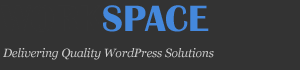
<style>
.page{position:relative;width:300px;height:70px;background:#333333}
.page>*{position:absolute;margin:0}
.t1{font:38px "BritannicBold";letter-spacing:-0.01em;color:#4488dd}
.t2{font:38px "BritannicBold";letter-spacing:-0.01em;color:#333333}
.t3{font:12px "Georgia-Italic";letter-spacing:-0.01em;color:#cccccc}
</style>
<div class="page">
<p class="t1" style="left:0px;top:5px;width:209px;height:27px"><span class="t2">WORK</span>SPACE</p>
<p class="t3" style="left:3px;top:48px;width:211px;height:12px">Delivering Quality WordPress Solutions</p>
</div>
